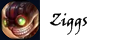
<style>
.page{position:relative;width:140px;height:40px;background:#ffffff}
.page>*{position:absolute;margin:0}
.t1{font:16px "VinerHandITC";color:#000000}
</style>
<div class="page">
<p class="t1" style="left:49px;top:13px;width:38px;height:22px">Ziggs</p>
</div>
